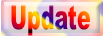
<style>
.page{position:relative;width:103px;height:36px}
.page>*{position:absolute;margin:0}
.t1{font:33.1px "Arial-Black";scale:0.62 1}
</style>
<div class="page">
<p class="t1" style="left:11px;top:5px;width:79px;height:31px">Update</p>
</div>
